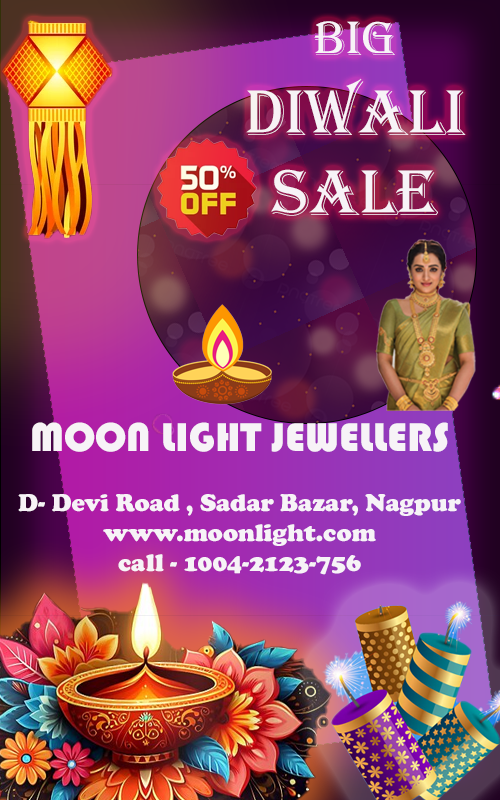
<style>
.page{position:relative;width:500px;height:800px}
.page>*{position:absolute;margin:0}
.t1{font:66.7px "Algerian";color:#f7f3f7}
.t2{font:50px "Algerian";color:#f7f3f7}
.t3{font:25px "CooperBlack";color:#f7f3f7}
.t4{font:41.7px "Bauhaus93";color:#f7f3f7}
</style>
<div class="page">
<p class="t1" style="left:246px;top:21px;width:220px;height:195px;text-align:center"><span class="t2">big<br></span>diwali<br>sale</p>
<p class="t3" style="left:18px;top:422px;width:443px;height:153px;text-align:center"><span class="t4">MOON LIGHT JEWELLERS<br></span><br>D- Devi Road , Sadar Bazar, Nagpur<br>www.moonlight.com<br>call - 1004-2123-756</p>
</div>
